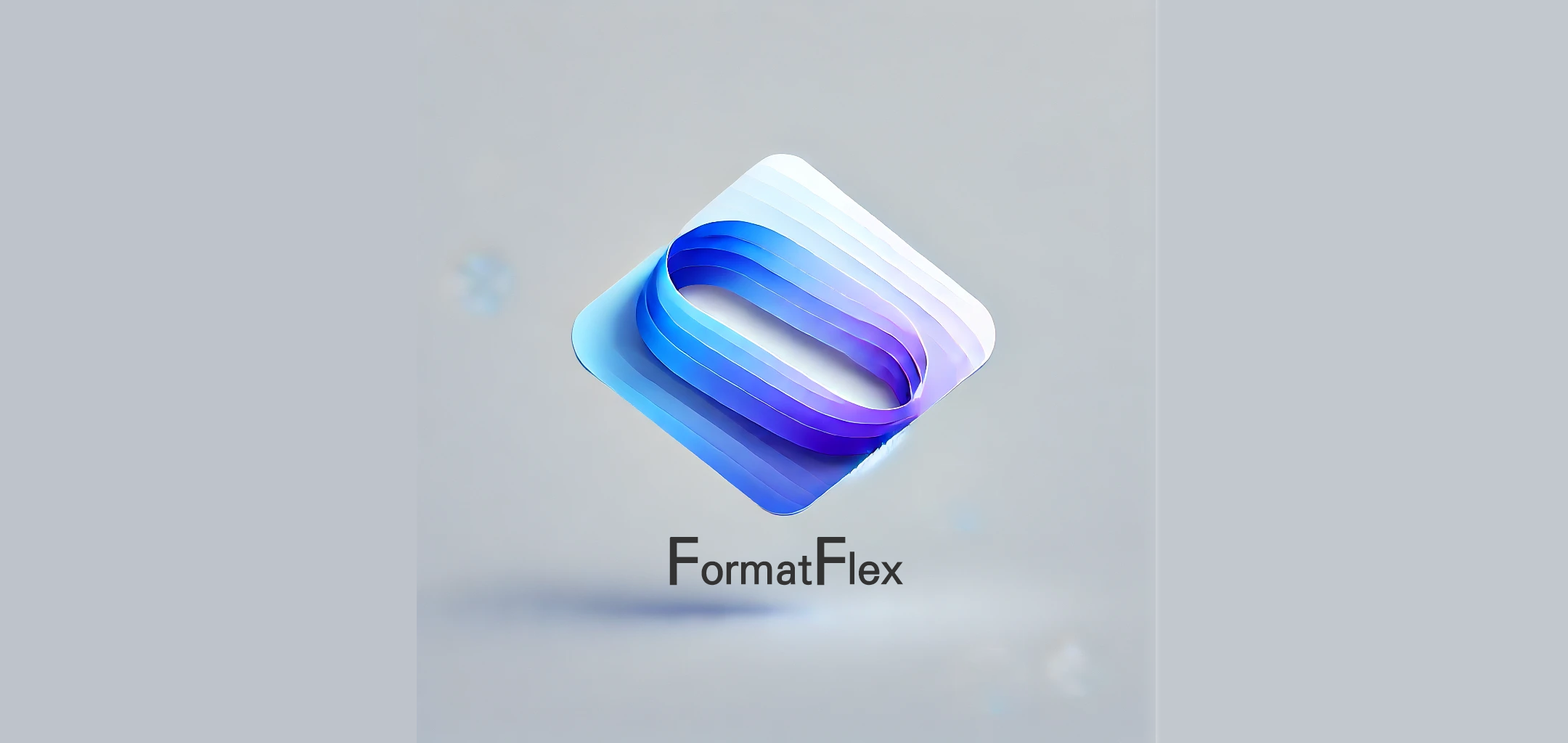
<style>
.page{position:relative;width:1568px;height:743px;background:#bec3cb}
.page>*{position:absolute;margin:0}
.t1{font:42.4px "KoPubWorldDotumBold";color:#333333}
.t2{font:63.7px "KoPubWorldDotumBold";color:#333333}
</style>
<div class="page">
<p class="t1" style="left:669px;top:537px;width:234px;height:49px"><span class="t2">F</span>ormat<span class="t2">F</span>lex</p>
</div>
